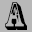
<style>
.page{position:relative;width:32px;height:32px;background:#b8b8b8}
.page>*{position:absolute;margin:0}
.t1{font:36px "RosewoodStd-Regular";color:#000000}
</style>
<div class="page">
<p class="t1" style="left:5px;top:2px;width:22px;height:28px">A</p>
</div>
